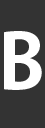
<style>
.page{position:relative;width:45px;height:128px;background:#333333}
.page>*{position:absolute;margin:0}
.t1{font:75px "AdobeGothicStd-Bold";color:#ffffff}
</style>
<div class="page">
<p class="t1" style="left:4px;top:31px;width:38px;height:59px;text-align:center">B<br>``</p>
</div>
